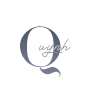
<style>
.page{position:relative;width:100px;height:100px;background:#ffffff}
.page>*{position:absolute;margin:0}
.t1{font:48px "Athene";letter-spacing:0.08em;color:#646873}
.t2{font:20px "Signatrust";letter-spacing:0.08em;color:#828d90}
.t3{font:20px "Signatrust";letter-spacing:0.08em;color:#bfc6c8}
</style>
<div class="page">
<p class="t1" style="left:20px;top:26px;width:41px;height:52px">Q</p>
<p class="t2" style="left:38px;top:38px;width:33px;height:19px">uy<span class="t3">n</span>h</p>
</div>
